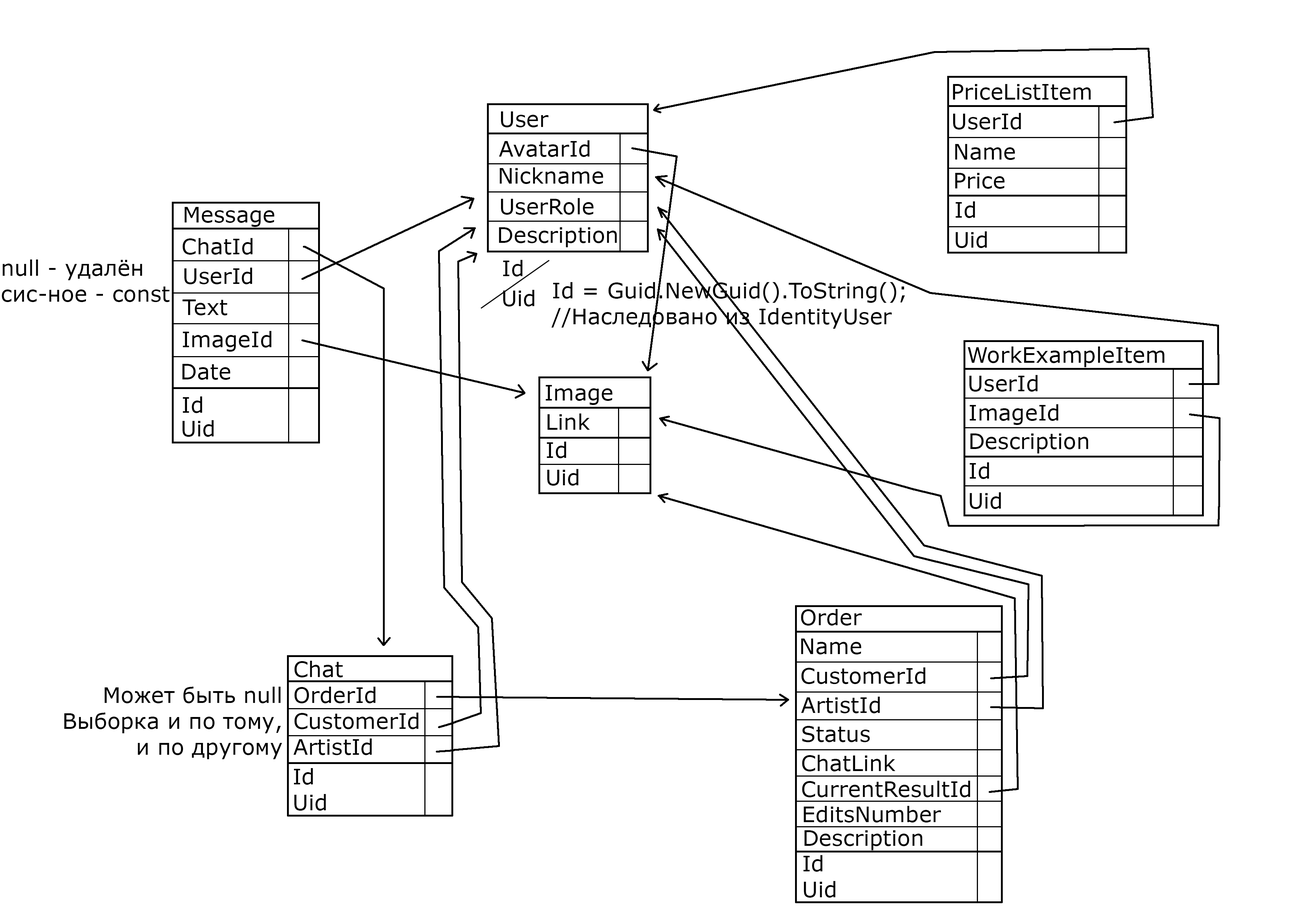
<style>
.page{position:relative;width:1299px;height:918px;background:#ffffff}
.page>*{position:absolute;margin:0}
.t1{font:21.6px "Verdana";color:#000000}
</style>
<div class="page">
<p class="t1" style="left:953px;top:84px;width:138px;height:16px">PriceListItem</p>
<p class="t1" style="left:501px;top:111px;width:47px;height:16px">User</p>
<p class="t1" style="left:953px;top:113px;width:68px;height:17px">UserId</p>
<p class="t1" style="left:499px;top:140px;width:90px;height:17px">AvatarId</p>
<p class="t1" style="left:955px;top:144px;width:60px;height:16px">Name</p>
<p class="t1" style="left:499px;top:167px;width:104px;height:17px">Nickname</p>
<p class="t1" style="left:955px;top:173px;width:49px;height:16px">Price</p>
<p class="t1" style="left:184px;top:207px;width:90px;height:20px">Message</p>
<p class="t1" style="left:501px;top:198px;width:92px;height:17px">UserRole</p>
<p class="t1" style="left:955px;top:201px;width:20px;height:17px">Id</p>
<p class="t1" style="left:499px;top:227px;width:118px;height:20px">Description</p>
<p class="t1" style="left:956px;top:231px;width:31px;height:17px">Uid</p>
<p class="t1" style="left:183px;top:238px;width:69px;height:17px">ChatId</p>
<p class="t1" style="left:2px;top:260px;width:168px;height:42px">null - удалён<br>сис-ное - const</p>
<p class="t1" style="left:184px;top:268px;width:68px;height:16px">UserId</p>
<p class="t1" style="left:503px;top:260px;width:19px;height:17px">Id</p>
<p class="t1" style="left:503px;top:290px;width:31px;height:17px">Uid</p>
<p class="t1" style="left:551px;top:282px;width:354px;height:47px">Id = Guid.NewGuid().ToString();<br>//Наследовано из IdentityUser</p>
<p class="t1" style="left:183px;top:300px;width:44px;height:15px">Text</p>
<p class="t1" style="left:183px;top:331px;width:88px;height:21px">ImageId</p>
<p class="t1" style="left:967px;top:347px;width:197px;height:20px">WorkExampleItem</p>
<p class="t1" style="left:182px;top:364px;width:48px;height:16px">Date</p>
<p class="t1" style="left:969px;top:375px;width:68px;height:17px">UserId</p>
<p class="t1" style="left:545px;top:385px;width:67px;height:20px">Image</p>
<p class="t1" style="left:183px;top:397px;width:19px;height:16px">Id</p>
<p class="t1" style="left:547px;top:414px;width:43px;height:16px">Link</p>
<p class="t1" style="left:969px;top:404px;width:89px;height:21px">ImageId</p>
<p class="t1" style="left:183px;top:420px;width:31px;height:17px">Uid</p>
<p class="t1" style="left:970px;top:434px;width:118px;height:20px">Description</p>
<p class="t1" style="left:546px;top:442px;width:20px;height:16px">Id</p>
<p class="t1" style="left:547px;top:469px;width:31px;height:17px">Uid</p>
<p class="t1" style="left:969px;top:462px;width:20px;height:17px">Id</p>
<p class="t1" style="left:970px;top:492px;width:31px;height:17px">Uid</p>
<p class="t1" style="left:801px;top:609px;width:61px;height:17px">Order</p>
<p class="t1" style="left:801px;top:639px;width:60px;height:16px">Name</p>
<p class="t1" style="left:293px;top:661px;width:125px;height:94px">Chat<br>OrderId<br>CustomerId<br>ArtistId</p>
<p class="t1" style="left:801px;top:668px;width:124px;height:16px">CustomerId</p>
<p class="t1" style="left:64px;top:687px;width:218px;height:72px;text-align:right">Может быть null<br>Выборка и по тому,<br>и по другому</p>
<p class="t1" style="left:801px;top:697px;width:79px;height:16px">ArtistId</p>
<p class="t1" style="left:802px;top:726px;width:68px;height:16px">Status</p>
<p class="t1" style="left:802px;top:755px;width:168px;height:42px">ChatLink<br>CurrentResultId</p>
<p class="t1" style="left:294px;top:768px;width:32px;height:43px">Id<br>Uid</p>
<p class="t1" style="left:803px;top:806px;width:138px;height:17px">EditsNumber</p>
<p class="t1" style="left:804px;top:830px;width:118px;height:20px">Description</p>
<p class="t1" style="left:803px;top:855px;width:32px;height:43px">Id<br>Uid</p>
</div>
